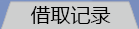
<style>
.page{position:relative;width:139px;height:29px;background:#cecfcf}
.page>*{position:absolute;margin:0}
.t1{font:20px "MicrosoftYaHei";color:#000000}
</style>
<div class="page">
<p class="t1" style="left:30px;top:6px;width:81px;height:18px">借取记录</p>
</div>
